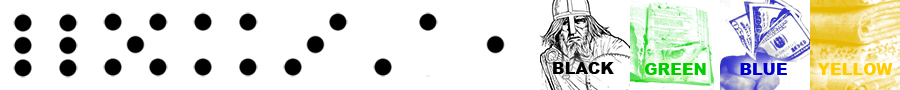
<style>
.page{position:relative;width:900px;height:90px;background:#ffffff}
.page>*{position:absolute;margin:0}
.t1{font:16.2px "Arial-Black";color:#000000}
.t2{font:16.2px "Arial-Black";color:#00cc00}
.t3{font:16.2px "Arial-Black";color:#0000cc}
.t4{font:16.2px "Arial-Black";color:#ffcc00}
</style>
<div class="page">
<p class="t1" style="left:553px;top:62px;width:61px;height:12px">BLACK</p>
<p class="t2" style="left:645px;top:63px;width:61px;height:12px">GREEN</p>
<p class="t3" style="left:740px;top:63px;width:47px;height:12px">BLUE</p>
<p class="t4" style="left:817px;top:63px;width:76px;height:12px">YELLOW</p>
</div>
